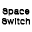
<style>
.page{position:relative;width:32px;height:32px;background:#ffffff}
.page>*{position:absolute;margin:0}
.t1{font:9px "Gulim";color:#000000;font-weight:bold}
</style>
<div class="page">
<p class="t1" style="left:2px;top:8px;width:28px;height:8px">Space</p>
<p class="t1" style="left:1px;top:18px;width:29px;height:7px">Switch</p>
</div>
